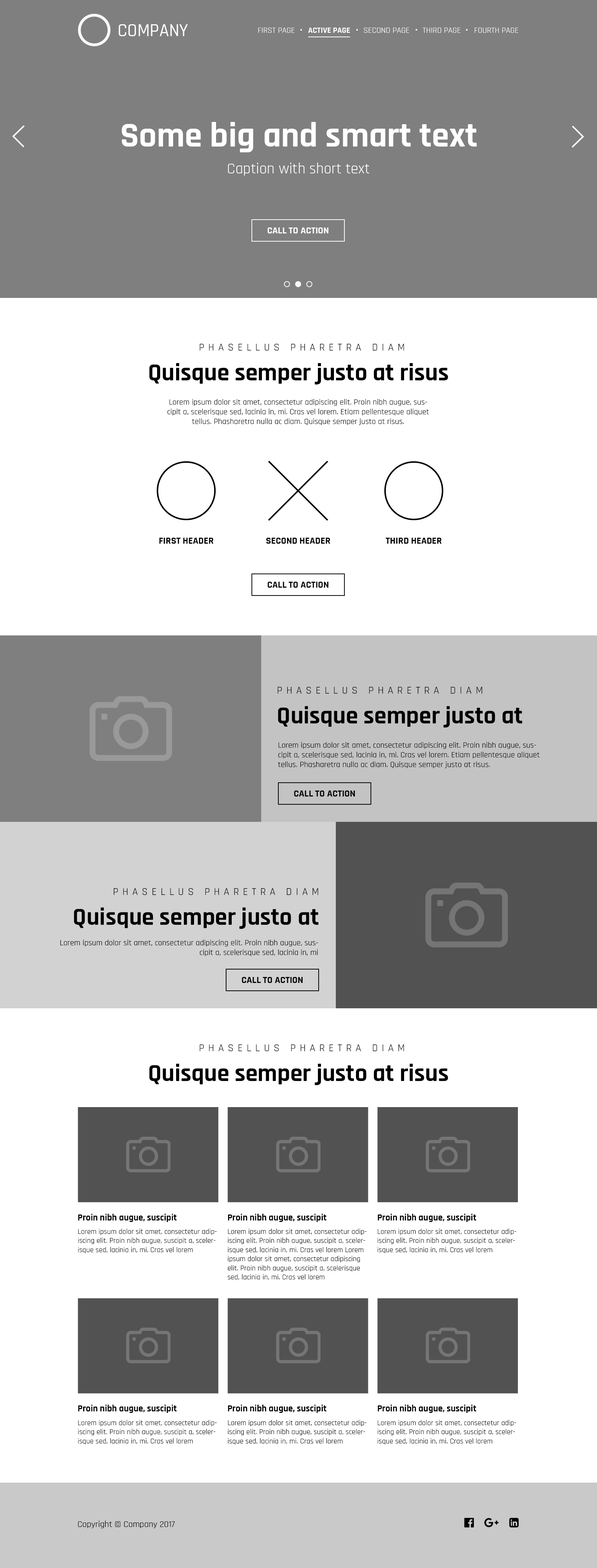
<style>
.page{position:relative;width:597px;height:1568px;background:#ffffff}
.page>*{position:absolute;margin:0}
.t1{font:8.2px "Rajdhani-Regular";color:#ffffff;text-transform:uppercase}
.t2{font:8.2px "Rajdhani-Bold";color:#ffffff;text-transform:uppercase}
.t3{font:35.1px "Rajdhani-Bold";color:#ffffff}
.t4{font:15.3px "Rajdhani-Regular";color:#ffffff}
.t5{font:9.7px "Rajdhani-Bold";color:#ffffff;text-transform:uppercase}
.t6{font:10.4px "Rajdhani-Regular";letter-spacing:0.38em;color:#000000;text-transform:uppercase}
.t7{font:24.6px "Rajdhani-Bold";color:#000000}
.t8{font:8.2px/9.7px "Rajdhani-Regular";color:#000000}
.t9{font:9.7px "Rajdhani-Bold";color:#000000;text-transform:uppercase}
.t10{font:9.5px "Rajdhani-Bold";color:#000000}
.t11{font:7.6px "Rajdhani-Regular";color:#000000}
.t12{font:8.9px "Rajdhani-Regular";color:#000000}
</style>
<div class="page">
<p class="t1" style="left:258px;top:28px;width:260px;height:5px">First Page      <span class="t2">ACTIVE PAGE</span>      Second Page      Third Page      fourth Page</p>
<p class="t3" style="left:122px;top:122px;width:355px;height:31px">Some big and smart text</p>
<p class="t4" style="left:228px;top:163px;width:141px;height:13px">Caption with short text</p>
<p class="t5" style="left:267px;top:227px;width:61px;height:6px">Call to action</p>
<p class="t6" style="left:199px;top:344px;width:205px;height:7px">Phasellus pharetra diam</p>
<p class="t7" style="left:149px;top:363px;width:299px;height:21px">Quisque semper justo at risus</p>
<p class="t8" style="left:167px;top:399px;width:262px;height:26px;text-align:center">Lorem ipsum dolor sit amet, consectetur adipiscing elit. Proin nibh augue, suscipit a, scelerisque sed, lacinia in, mi. Cras vel lorem. Etiam pellentesque aliquet tellus. Phasharetra nulla ac diam. Quisque semper justo at risus.</p>
<p class="t9" style="left:159px;top:538px;width:54px;height:6px">first HEADER</p>
<p class="t9" style="left:266px;top:538px;width:64px;height:6px">second HEADER</p>
<p class="t9" style="left:385px;top:538px;width:57px;height:6px">third HEADER</p>
<p class="t9" style="left:267px;top:582px;width:61px;height:6px">Call to action</p>
<p class="t6" style="left:277px;top:687px;width:205px;height:7px">Phasellus pharetra diam</p>
<p class="t7" style="left:278px;top:706px;width:244px;height:22px">Quisque semper justo at</p>
<p class="t8" style="left:278px;top:742px;width:261px;height:26px">Lorem ipsum dolor sit amet, consectetur adipiscing elit. Proin nibh augue, suscipit a, scelerisque sed, lacinia in, mi. Cras vel lorem. Etiam pellentesque aliquet tellus. Phasharetra nulla ac diam. Quisque semper justo at risus.</p>
<p class="t9" style="left:294px;top:791px;width:61px;height:5px">Call to action</p>
<p class="t6" style="left:113px;top:888px;width:205px;height:7px">Phasellus pharetra diam</p>
<p class="t7" style="left:74px;top:907px;width:244px;height:22px">Quisque semper justo at</p>
<p class="t8" style="left:60px;top:940px;width:258px;height:16px;text-align:right">Lorem ipsum dolor sit amet, consectetur adipiscing elit. Proin nibh augue, suscipit a, scelerisque sed, lacinia in, mi</p>
<p class="t9" style="left:242px;top:977px;width:60px;height:6px">Call to action</p>
<p class="t6" style="left:199px;top:1044px;width:205px;height:7px">Phasellus pharetra diam</p>
<p class="t7" style="left:149px;top:1063px;width:299px;height:22px">Quisque semper justo at risus</p>
<p class="t10" style="left:78px;top:1214px;width:99px;height:8px">Proin nibh augue, suscipit</p>
<p class="t10" style="left:228px;top:1214px;width:98px;height:8px">Proin nibh augue, suscipit</p>
<p class="t10" style="left:377px;top:1214px;width:99px;height:8px">Proin nibh augue, suscipit</p>
<p class="t11" style="left:78px;top:1229px;width:139px;height:24px">Lorem ipsum dolor sit amet, consectetur adipiscing elit. Proin nibh augue, suscipit a, scelerisque sed, lacinia in, mi. Cras vel lorem</p>
<p class="t11" style="left:227px;top:1229px;width:140px;height:51px">Lorem ipsum dolor sit amet, consectetur adipiscing elit. Proin nibh augue, suscipit a, scelerisque sed, lacinia in, mi. Cras vel lorem Lorem ipsum dolor sit amet, consectetur adipiscing elit. Proin nibh augue, suscipit a, scelerisque sed, lacinia in, mi. Cras vel lorem</p>
<p class="t11" style="left:377px;top:1229px;width:139px;height:24px">Lorem ipsum dolor sit amet, consectetur adipiscing elit. Proin nibh augue, suscipit a, scelerisque sed, lacinia in, mi. Cras vel lorem</p>
<p class="t10" style="left:78px;top:1405px;width:99px;height:8px">Proin nibh augue, suscipit</p>
<p class="t10" style="left:228px;top:1405px;width:98px;height:8px">Proin nibh augue, suscipit</p>
<p class="t10" style="left:377px;top:1405px;width:99px;height:8px">Proin nibh augue, suscipit</p>
<p class="t11" style="left:78px;top:1420px;width:139px;height:25px">Lorem ipsum dolor sit amet, consectetur adipiscing elit. Proin nibh augue, suscipit a, scelerisque sed, lacinia in, mi. Cras vel lorem</p>
<p class="t11" style="left:228px;top:1420px;width:139px;height:25px">Lorem ipsum dolor sit amet, consectetur adipiscing elit. Proin nibh augue, suscipit a, scelerisque sed, lacinia in, mi. Cras vel lorem</p>
<p class="t11" style="left:377px;top:1420px;width:139px;height:25px">Lorem ipsum dolor sit amet, consectetur adipiscing elit. Proin nibh augue, suscipit a, scelerisque sed, lacinia in, mi. Cras vel lorem</p>
<p class="t12" style="left:78px;top:1521px;width:97px;height:7px">Copyright © Company 2017</p>
</div>
